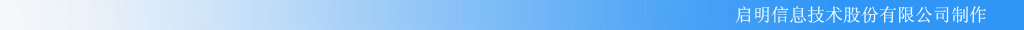
<style>
.page{position:relative;width:1024px;height:30px}
.page>*{position:absolute;margin:0}
.t1{font:18px "SimSun";color:#ffffff}
</style>
<div class="page">
<p class="t1" style="left:736px;top:6px;width:250px;height:17px">启明信息技术股份有限公司制作</p>
</div>
